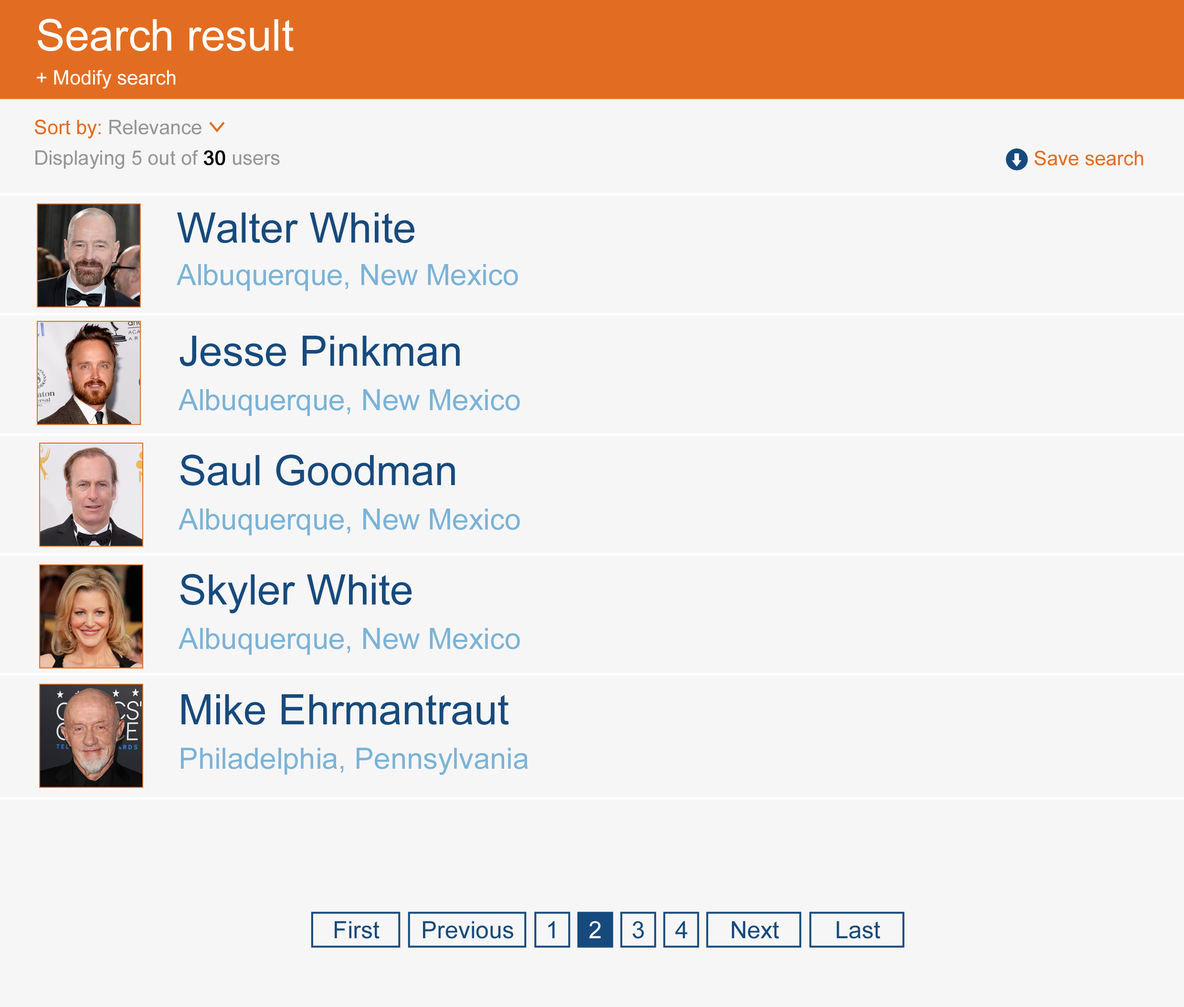
<style>
.page{position:relative;width:1184px;height:1007px;background:#f7f6f6}
.page>*{position:absolute;margin:0}
.t1{font:43.8px "ArialMT";color:#ffffff}
.t2{font:19.9px "ArialMT";color:#ffffff}
.t3{font:19.9px "ArialMT";color:#959595}
.t4{font:19.9px "ArialMT";color:#e26d22}
.t5{font:27.9px "Consolas";color:#e26d22}
.t6{font:19.9px "ArialMT";color:#000000;font-weight:bold}
.t7{font:41.9px "ArialMT";color:#174a7c}
.t8{font:29.3px "ArialMT";color:#7bb3d7}
.t9{font:23.9px "ArialMT";color:#174a7c}
.t10{font:23.9px "ArialMT";color:#ffffff}
</style>
<div class="page">
<p class="t1" style="left:38px;top:19px;width:256px;height:32px">Search result</p>
<p class="t2" style="left:37px;top:70px;width:139px;height:19px">+ Modify search</p>
<p class="t3" style="left:35px;top:119px;width:166px;height:19px"><span class="t4">Sort by: </span>Relevance</p>
<p class="t5" style="left:209px;top:122px;width:16px;height:10px;rotate:90deg">&gt;</p>
<p class="t3" style="left:35px;top:150px;width:245px;height:19px">Displaying 5 out of <span class="t6">30</span> users</p>
<p class="t4" style="left:1035px;top:150px;width:109px;height:16px">Save search</p>
<p class="t7" style="left:177px;top:212px;width:237px;height:31px">Walter White</p>
<p class="t8" style="left:177px;top:264px;width:341px;height:27px">Albuquerque, New Mexico</p>
<p class="t7" style="left:180px;top:336px;width:280px;height:30px">Jesse Pinkman</p>
<p class="t8" style="left:179px;top:389px;width:341px;height:27px">Albuquerque, New Mexico</p>
<p class="t7" style="left:180px;top:455px;width:275px;height:31px">Saul Goodman</p>
<p class="t8" style="left:179px;top:509px;width:341px;height:27px">Albuquerque, New Mexico</p>
<p class="t7" style="left:180px;top:574px;width:232px;height:40px">Skyler White</p>
<p class="t8" style="left:179px;top:628px;width:341px;height:27px">Albuquerque, New Mexico</p>
<p class="t7" style="left:181px;top:694px;width:328px;height:31px">Mike Ehrmantraut</p>
<p class="t8" style="left:181px;top:748px;width:347px;height:27px">Philadelphia, Pennsylvania</p>
<p class="t9" style="left:335px;top:921px;width:45px;height:18px">First</p>
<p class="t9" style="left:423px;top:921px;width:90px;height:18px">Previous</p>
<p class="t9" style="left:548px;top:921px;width:7px;height:17px">1</p>
<p class="t10" style="left:589px;top:921px;width:12px;height:17px">2</p>
<p class="t9" style="left:633px;top:921px;width:11px;height:18px">3</p>
<p class="t9" style="left:675px;top:921px;width:13px;height:17px">4</p>
<p class="t9" style="left:732px;top:921px;width:47px;height:18px">Next</p>
<p class="t9" style="left:837px;top:921px;width:43px;height:18px">Last</p>
</div>
